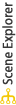
<style>
.page{position:relative;width:16px;height:105px;background:#ffffff}
.page>*{position:absolute;margin:0}
.t1{font:14px "MyriadPro-Regular";color:#373737;font-weight:bold;scale:0.9 1}
</style>
<div class="page">
<p class="t1" style="left:2px;top:2px;width:14px;height:83px;rotate:-90deg">Scene Explorer</p>
</div>
